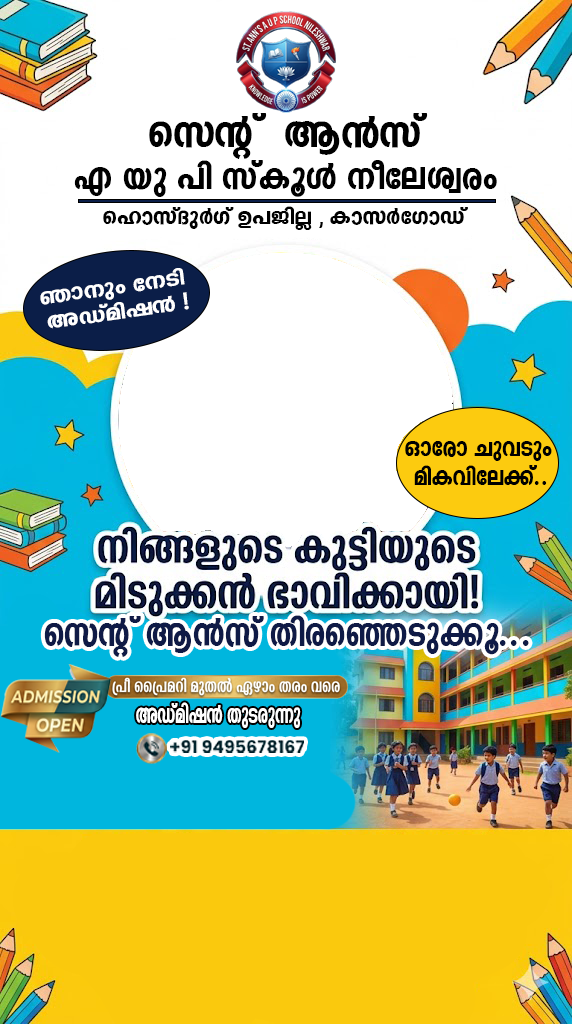
<style>
.page{position:relative;width:572px;height:1024px;background:#ffffff}
.page>*{position:absolute;margin:0}
.t1{font:43.9px/42px "ML-KV-Shajil-H-Heavy";color:#000000;scale:1.06 1}
.t2{font:52px/42px "ML-KV-Shajil-H-Heavy";color:#000000;scale:1.06 1}
.t3{font:27.2px "ML-KV-Shajil-H-Heavy";color:#000000;scale:1.15 1}
.t4{font:26.2px/25.1px "ML-KV-Shajil-H-Heavy";color:#ffffff;scale:1.3 1}
.t5{font:30.3px/29px "ML-KV-Shajil-H-Heavy";color:#000000}
.t6{font:46.5px "ML-KV-Shajil-H-Heavy";color:#0f1a46}
.t7{font:31.4px "ML-KV-Shamitha-H-Heavy";color:#ffffff;scale:0.72 1}
</style>
<div class="page">
<p class="t1" style="left:74px;top:113px;width:423px;height:84px;text-align:center"><span class="t2">skâv  B³kv <br></span>F bp ]n kvIqÄ \oteizcw</p>
<p class="t3" style="left:103px;top:206px;width:365px;height:24px">slmkvZpÀKv D]PnÃ , ImkÀtKmUv</p>
<p class="t4" style="left:40px;top:268px;width:149px;height:61px;text-align:center;rotate:-8deg">Rm\pw t\Sn <br>AUvanj³ !</p>
<p class="t5" style="left:405px;top:441px;width:147px;height:44px;text-align:center">Hmtcm NphSpw <br>anIhnte¡v..</p>
<p class="t6" style="left:44px;top:615px;width:485px;height:42px">skâv B³kv XncsªSp¡q...</p>
<p class="t7" style="left:136px;top:702px;width:165px;height:26px">AUvanj³ XpScp¶p</p>
</div>
